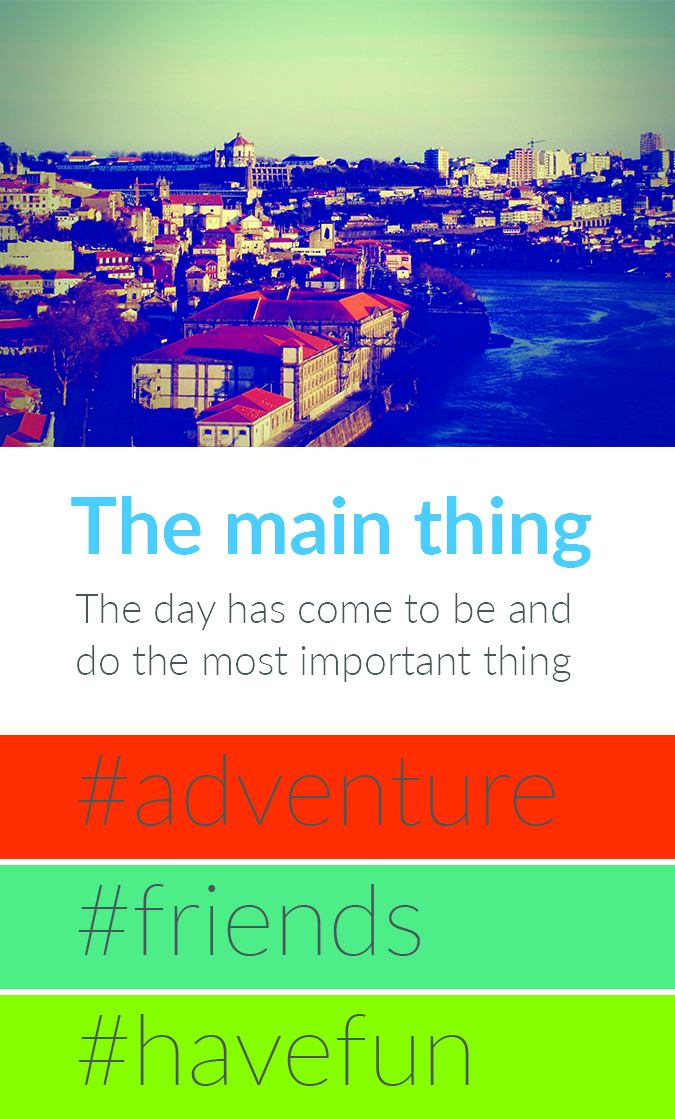
<style>
.page{position:relative;width:675px;height:1119px;background:#ffffff}
.page>*{position:absolute;margin:0}
.t1{font:79px "Lato-Bold";color:#4acdff}
.t2{font:41px/52px "Lato-Light";color:#48585a}
</style>
<div class="page">
<p class="t1" style="left:71px;top:496px;width:521px;height:72px">The main thing</p>
<p class="t2" style="left:75px;top:593px;width:496px;height:89px;text-align:right">The day has come to be and do the most important thing</p>
</div>
